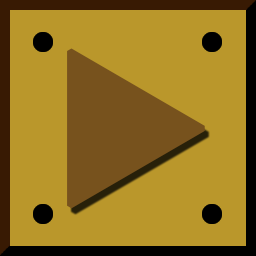
<style>
.page{position:relative;width:256px;height:256px;background:#ba972b}
.page>*{position:absolute;margin:0}
.t1{font:215px "Xolonium-Bold";color:#77521d;font-weight:bold}
</style>
<div class="page">
<p class="t1" style="left:67px;top:48px;width:138px;height:161px">▶</p>
</div>
